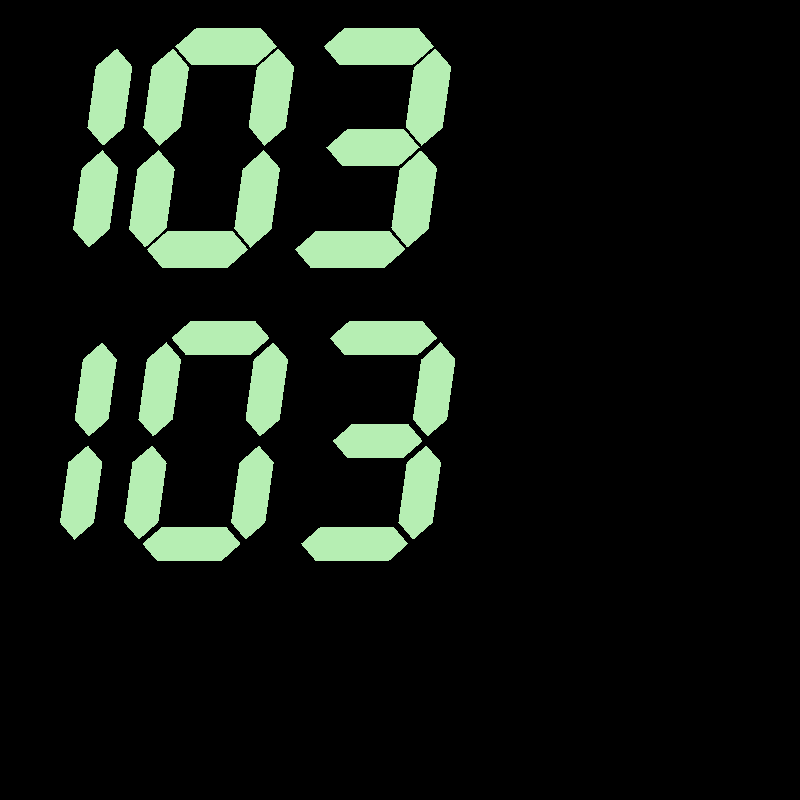
<style>
.page{position:relative;width:800px;height:800px;background:#000000}
.page>*{position:absolute;margin:0}
.t1{font:300px "MouseLEDU";color:#b6eeb3}
.t2{font:300px "MouseLED2U";color:#b6eeb3}
</style>
<div class="page">
<p class="t1" style="left:73px;top:28px;width:378px;height:240px">103</p>
<p class="t2" style="left:60px;top:321px;width:395px;height:240px">103</p>
</div>
